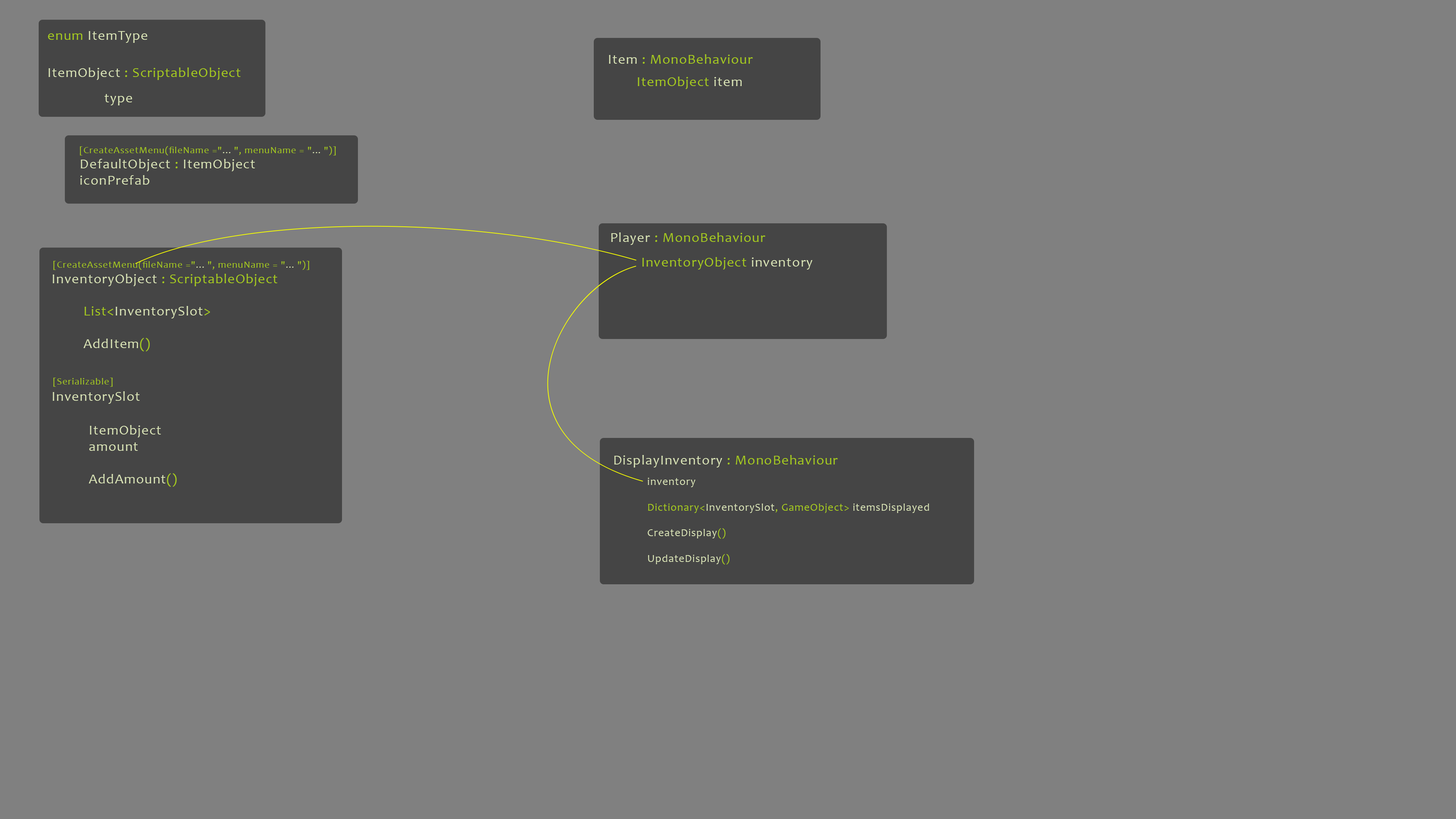
<style>
.page{position:relative;width:1456px;height:819px;background:#808080}
.page>*{position:absolute;margin:0}
.t1{font:13.6px "Candara";letter-spacing:0.05em;color:#d9e3b6}
.t2{font:13.6px "Candara";letter-spacing:0.05em;color:#a5c91e}
.t3{font:9.6px "Candara";letter-spacing:0.05em;color:#a5c91e}
.t4{font:9.6px "Candara";letter-spacing:0.05em;color:#d9e3b6}
.t5{font:10.7px "Candara";letter-spacing:0.05em;color:#d9e3b6}
.t6{font:10.7px "Candara";letter-spacing:0.05em;color:#a5c91e}
</style>
<div class="page">
<p class="t1" style="left:48px;top:31px;width:99px;height:12px"><span class="t2">enum </span>ItemType</p>
<p class="t2" style="left:609px;top:54px;width:144px;height:10px"><span class="t1">Item </span>: MonoBehaviour</p>
<p class="t2" style="left:49px;top:67px;width:192px;height:13px"><span class="t1">ItemObject</span> : ScriptableObject</p>
<p class="t2" style="left:638px;top:77px;width:104px;height:12px">ItemObject <span class="t1">item</span></p>
<p class="t1" style="left:104px;top:94px;width:28px;height:11px">type</p>
<p class="t3" style="left:80px;top:146px;width:256px;height:9px">[CreateAssetMenu(fileName ="<span class="t4">... </span>", menuName = "<span class="t4">... </span>")]</p>
<p class="t1" style="left:80px;top:159px;width:175px;height:26px">DefaultObject <span class="t2">: </span>ItemObject<br>iconPrefab</p>
<p class="t2" style="left:611px;top:232px;width:155px;height:13px"><span class="t1">Player </span>: MonoBehaviour</p>
<p class="t2" style="left:642px;top:257px;width:171px;height:13px">InventoryObject <span class="t1">inventory</span></p>
<p class="t3" style="left:53px;top:260px;width:256px;height:10px">[CreateAssetMenu(fileName ="<span class="t4">... </span>", menuName = "<span class="t4">... </span>")]</p>
<p class="t2" style="left:53px;top:274px;width:225px;height:12px"><span class="t1">InventoryObject</span> : ScriptableObject</p>
<p class="t1" style="left:83px;top:306px;width:127px;height:45px"><span class="t2">List&lt;</span>InventorySlot<span class="t2">&gt;<br><br></span>AddItem<span class="t2">()</span></p>
<p class="t3" style="left:53px;top:378px;width:60px;height:9px">[Serializable]</p>
<p class="t1" style="left:53px;top:391px;width:87px;height:13px">InventorySlot</p>
<p class="t1" style="left:89px;top:425px;width:88px;height:62px">ItemObject<br>amount<br><br>AddAmount<span class="t2">()</span></p>
<p class="t1" style="left:614px;top:455px;width:224px;height:13px">DisplayInventory<span class="t2"> : MonoBehaviour</span></p>
<p class="t5" style="left:648px;top:478px;width:281px;height:87px">inventory<br><span class="t6"><br>Dictionary&lt;</span>InventorySlot<span class="t6">, GameObject&gt; </span>itemsDisplayed<br><br>CreateDisplay<span class="t6">()<br><br></span>UpdateDisplay<span class="t6">()</span></p>
</div>
